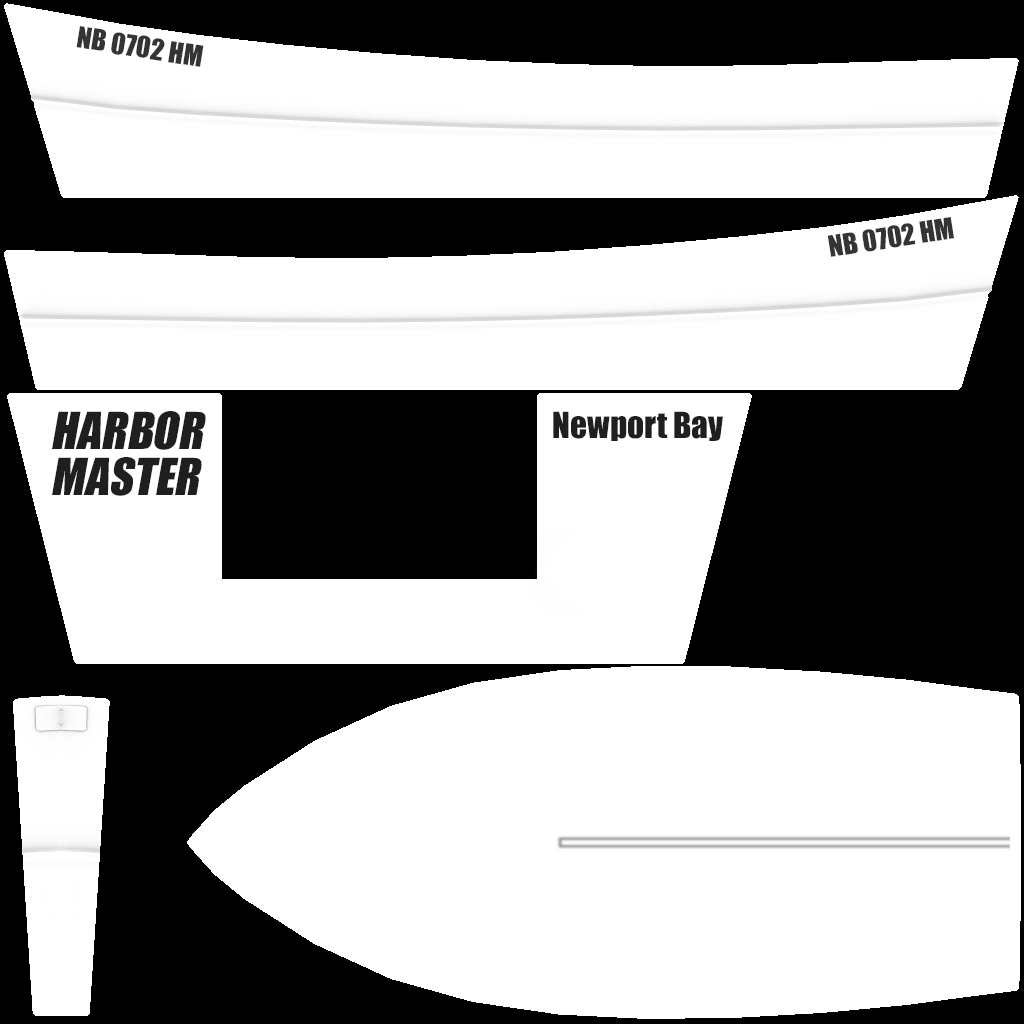
<style>
.page{position:relative;width:1024px;height:1024px;background:#ffffff}
.page>*{position:absolute;margin:0}
.t1{font:27.1px "Impact";color:#343434}
.t2{font:46.9px/45.8px "Impact";color:#1f1f1f;font-style:italic}
.t3{font:33.3px "Impact";color:#1f1f1f}
</style>
<div class="page">
<p class="t1" style="left:76px;top:26px;width:128px;height:41px;rotate:9deg">NB 0702 HM</p>
<p class="t1" style="left:827px;top:217px;width:127px;height:40px;rotate:-9deg">NB 0702 HM</p>
<p class="t2" style="left:52px;top:411px;width:154px;height:85px">HARBOR<br>MASTER</p>
<p class="t3" style="left:553px;top:411px;width:170px;height:30px">Newport Bay</p>
</div>
